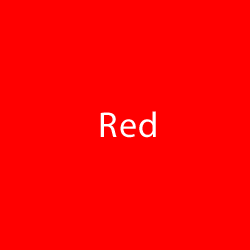
<style>
.page{position:relative;width:250px;height:250px;background:#ff0000}
.page>*{position:absolute;margin:0}
.t1{font:36px "MyriadPro-Regular";letter-spacing:0.025em;color:#ffffff}
</style>
<div class="page">
<p class="t1" style="left:100px;top:111px;width:56px;height:27px">Red</p>
</div>
